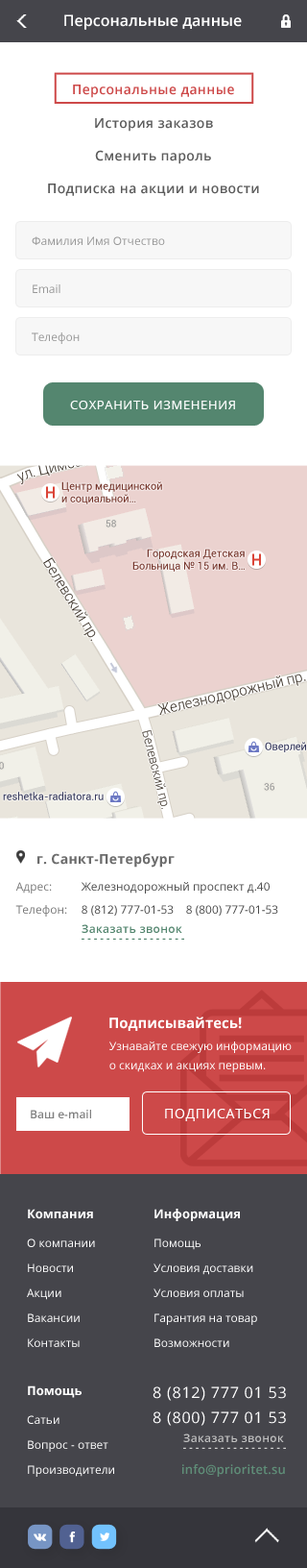
<style>
.page{position:relative;width:307px;height:1568px;background:#ffffff}
.page>*{position:absolute;margin:0}
.t1{font:15.4px "OpenSans-Semibold";color:#ffffff}
.t2{font:13.5px "OpenSans-Semibold";letter-spacing:0.025em;color:#cd4949}
.t3{font:13.5px "OpenSans-Semibold";letter-spacing:0.025em;color:#5c5c5c}
.t4{font:11.5px "OpenSans";color:#989898}
.t5{font:12.5px "OpenSans";letter-spacing:0.05em;color:#ffffff;text-transform:uppercase}
.t6{font:13.5px "OpenSans-Bold";letter-spacing:0.025em;color:#6c6c6c}
.t7{font:11.5px/23.1px "OpenSans";color:#797979}
.t8{font:11.5px/23.1px "OpenSans";color:#4b4b4b}
.t9{font:11.5px/19.2px "OpenSans";color:#4b4b4b}
.t10{font:11.5px "OpenSans-Semibold";letter-spacing:0.025em;color:#54866f}
.t11{font:14.4px "OpenSans-Bold";color:#ffffff}
.t12{font:11.5px/19.2px "OpenSans";color:#ffffff}
.t13{font:11.5px "OpenSans-Semibold";color:#818181}
.t14{font:13.5px "OpenSans";letter-spacing:0.05em;color:#ffffff;text-transform:uppercase}
.t15{font:11.5px/25px "OpenSans";color:#ffffff}
.t16{font:12.5px/23.1px "OpenSans-Bold";color:#ffffff}
.t17{font:11.5px/28.8px "OpenSans";color:#ffffff}
.t18{font:15.4px/25px "OpenSans";letter-spacing:0.05em;color:#ffffff}
.t19{font:11.5px "OpenSans-Semibold";letter-spacing:0.025em;color:#bfbfbf}
.t20{font:12.5px "OpenSans-Semibold";letter-spacing:0.01em;color:#5f8e78}
</style>
<div class="page">
<p class="t1" style="left:64px;top:14px;width:178px;height:16px">Персональные данные</p>
<p class="t2" style="left:73px;top:85px;width:161px;height:13px">Персональные данные</p>
<p class="t3" style="left:95px;top:118px;width:118px;height:14px">История заказов</p>
<p class="t3" style="left:95px;top:150px;width:116px;height:14px">Сменить пароль</p>
<p class="t3" style="left:48px;top:184px;width:211px;height:12px">Подписка на акции и новости</p>
<p class="t4" style="left:32px;top:236px;width:133px;height:9px">Фамилия Имя Отчество</p>
<p class="t4" style="left:33px;top:284px;width:28px;height:9px">Email</p>
<p class="t4" style="left:32px;top:332px;width:48px;height:12px">Телефон</p>
<p class="t5" style="left:70px;top:401px;width:165px;height:8px">сохранить изменения</p>
<p class="t6" style="left:37px;top:853px;width:138px;height:15px">г. Санкт-Петербург</p>
<p class="t7" style="left:15px;top:882px;width:52px;height:35px">Адрес:<br>Телефон:</p>
<p class="t8" style="left:81px;top:882px;width:198px;height:34px">Железнодорожный проспект д.40  <br>8 (812) 777-01-53    <span class="t9">8 (800) 777-01-53</span></p>
<p class="t10" style="left:82px;top:924px;width:101px;height:9px">Заказать звонок</p>
<p class="t11" style="left:110px;top:1017px;width:132px;height:14px">Подписывайтесь!</p>
<p class="t12" style="left:110px;top:1041px;width:182px;height:31px">Узнавайте свежую информацию <br>о скидках и акциях первым.</p>
<p class="t13" style="left:31px;top:1110px;width:60px;height:8px">Ваш e-mail</p>
<p class="t14" style="left:165px;top:1109px;width:105px;height:12px">подписаться</p>
<p class="t15" style="left:27px;top:1209px;width:68px;height:138px"><span class="t16">Компания<br></span><span class="t17">О компании<br></span>Новости<br>Акции<br>Вакансии<br>Контакты</p>
<p class="t15" style="left:154px;top:1209px;width:103px;height:138px"><span class="t16">Информация<br></span><span class="t17">Помощь<br></span>Условия доставки<br>Условия оплаты<br>Гарантия на товар<br>Возможности</p>
<p class="t15" style="left:27px;top:1385px;width:87px;height:92px"><span class="t16">Помощь<br></span><span class="t17">Сатьи<br></span>Вопрос - ответ<br>Производители</p>
<p class="t18" style="left:153px;top:1386px;width:133px;height:40px">8 (812) 777 01 53<br>8 (800) 777 01 53</p>
<p class="t19" style="left:184px;top:1433px;width:100px;height:9px">Заказать звонок</p>
<p class="t20" style="left:183px;top:1464px;width:102px;height:13px">info@prioritet.su</p>
</div>
